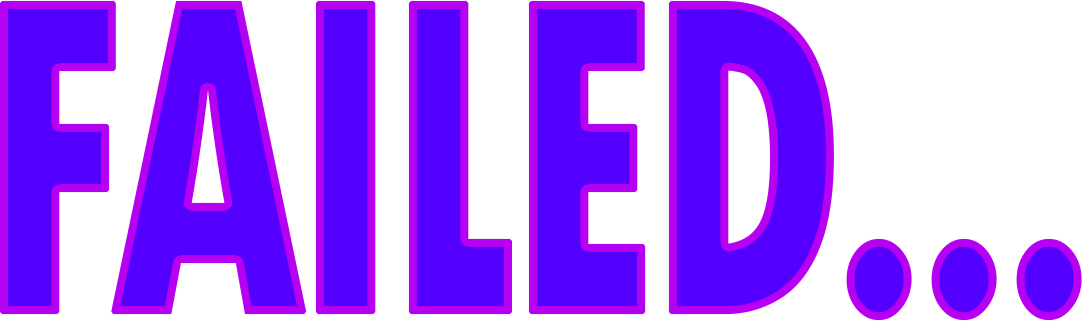
<style>
.page{position:relative;width:1082px;height:321px;background:#ffffff}
.page>*{position:absolute;margin:0}
.t1{font:473.6px "TwCenMT-CondensedExtraBold";letter-spacing:-0.07em;color:#5400ff;font-weight:bold;scale:0.79 1}
</style>
<div class="page">
<p class="t1" style="left:0px;top:0px;width:1082px;height:321px">FAILED...</p>
</div>
